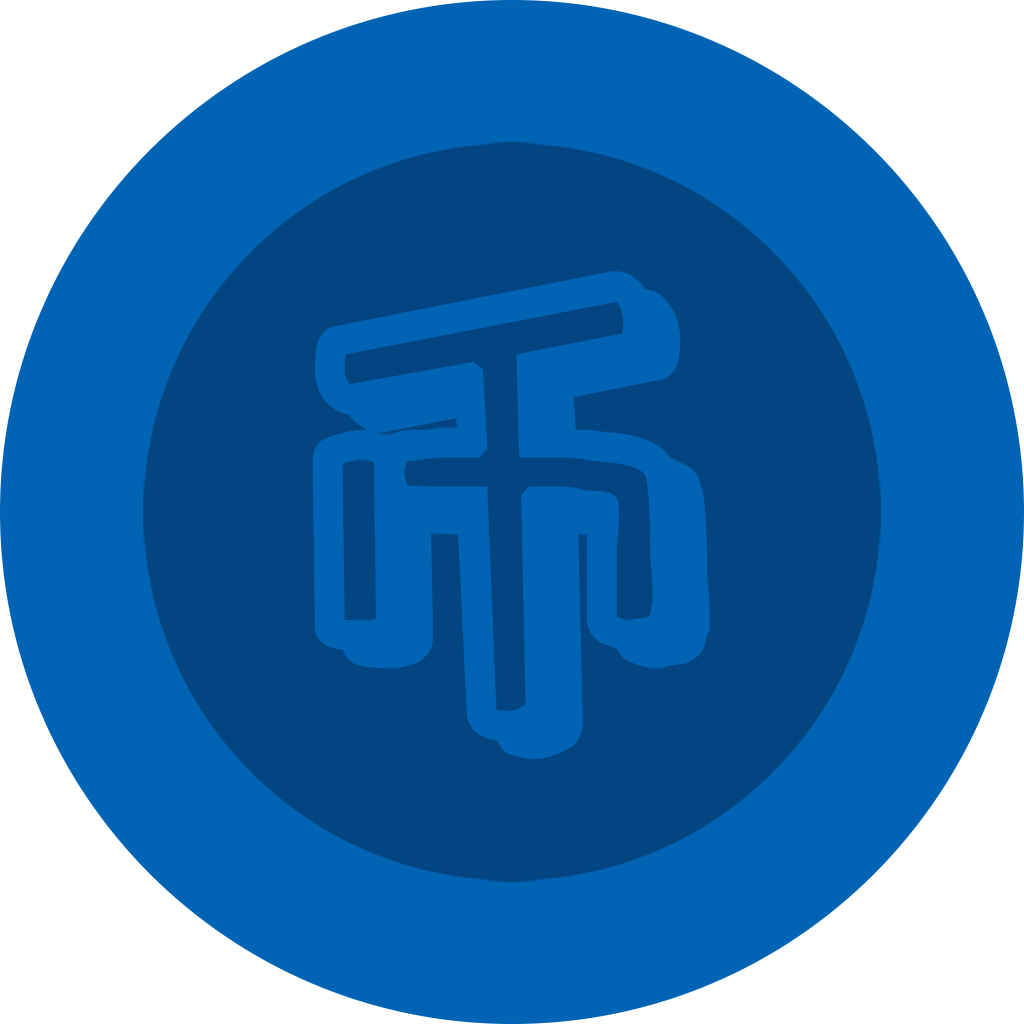
<style>
.page{position:relative;width:1024px;height:1024px;background:#0063b3}
.page>*{position:absolute;margin:0}
.t1{font:580.2px "baotuxiaobaiti";color:#0063b3;font-weight:bold}
</style>
<div class="page">
<p class="t1" style="left:312px;top:271px;width:398px;height:488px">币</p>
</div>
